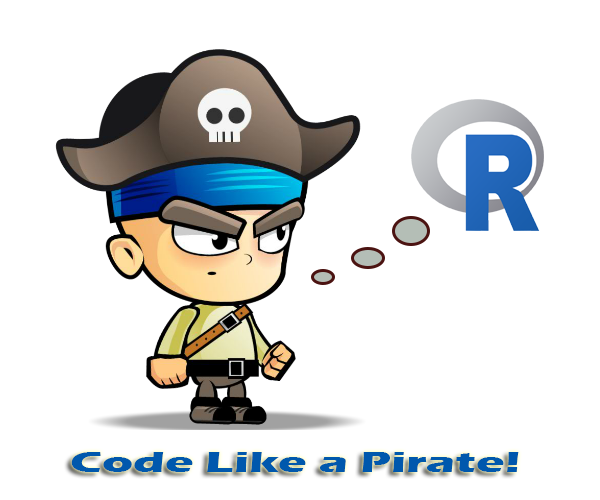
<style>
.page{position:relative;width:600px;height:500px;background:#ffffff}
.page>*{position:absolute;margin:0}
.t1{font:29.8px "ErasITC-Bold";color:#0058ad;scale:1.61 1}
</style>
<div class="page">
<p class="t1" style="left:71px;top:452px;width:448px;height:20px">Code Like a Pirate!</p>
</div>
